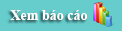
<style>
.page{position:relative;width:122px;height:31px;background:#66cccc}
.page>*{position:absolute;margin:0}
.t1{font:14px "TimesNewRomanPS-BoldMT";color:#ffffff}
</style>
<div class="page">
<p class="t1" style="left:10px;top:10px;width:78px;height:10px">Xem báo cáo</p>
</div>
